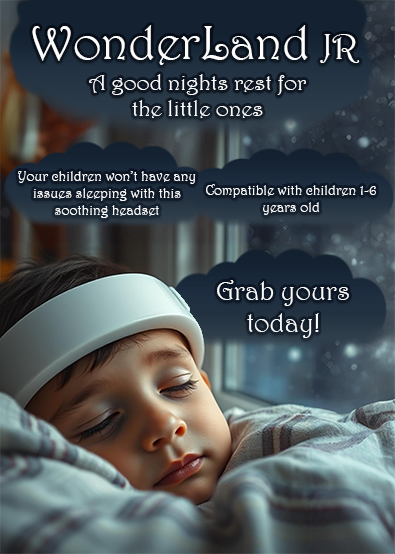
<style>
.page{position:relative;width:395px;height:554px}
.page>*{position:absolute;margin:0}
.t1{font:47.5px "Harrington";color:#fefefe;scale:1.04 1}
.t2{font:36px "Harrington";color:#fefefe;scale:1.04 1}
.t3{font:21.7px "Harrington";color:#fefefe;scale:1.04 1}
.t4{font:14px "Harrington";color:#fefefe}
.t5{font:27px "Harrington";color:#fefefe}
</style>
<div class="page">
<p class="t1" style="left:32px;top:25px;width:328px;height:40px">WonderLand <span class="t2">JR</span></p>
<p class="t3" style="left:89px;top:74px;width:217px;height:44px;text-align:center">A good nights rest for the little ones</p>
<p class="t4" style="left:18px;top:171px;width:178px;height:47px;text-align:center">Your children won’t have any issues sleeping with this soothing headset</p>
<p class="t4" style="left:206px;top:184px;width:170px;height:31px;text-align:center">Compatible with children 1-6 years old</p>
<p class="t5" style="left:217px;top:280px;width:132px;height:58px;text-align:center">Grab yours today!</p>
</div>
